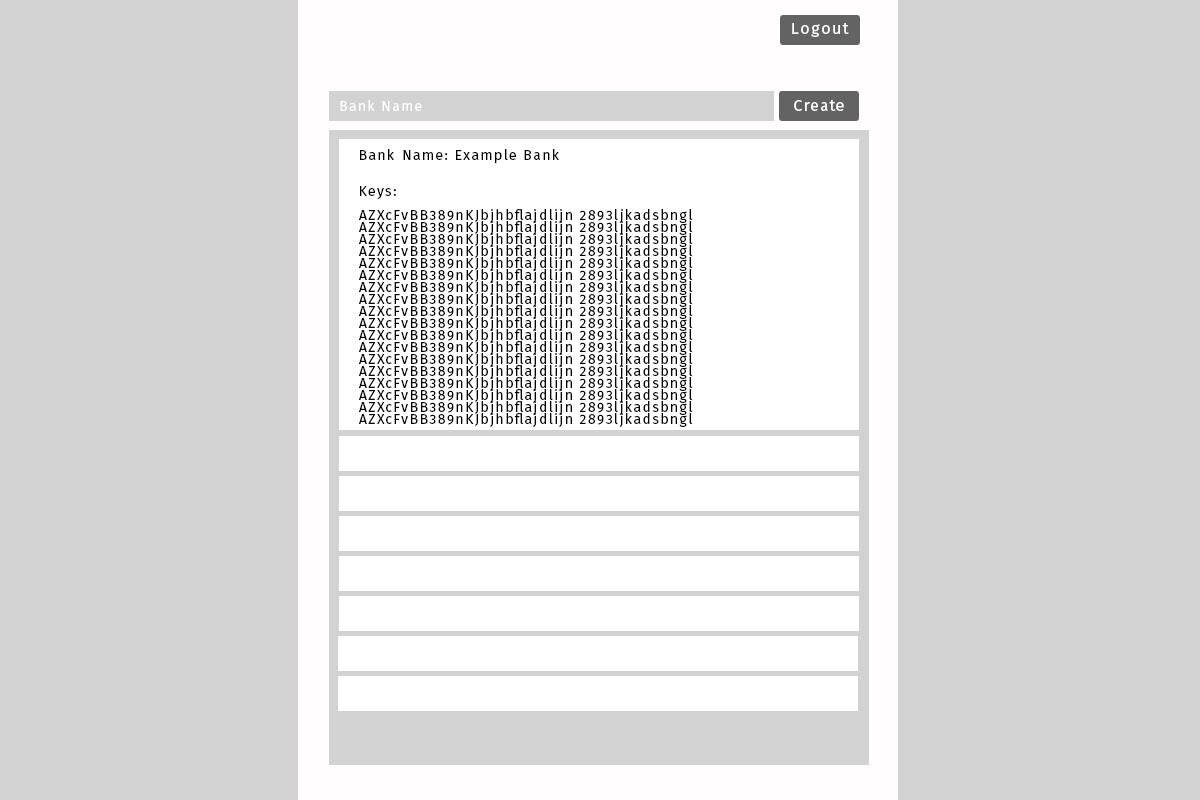
<style>
.page{position:relative;width:1200px;height:800px;background:#d2d2d2}
.page>*{position:absolute;margin:0}
.t1{font:16px "FiraSans-Regular";letter-spacing:0.1em;color:#fffefe}
.t2{font:14px "FiraSans-Regular";letter-spacing:0.1em;color:#ffffff}
.t3{font:16px "FiraSans-Regular";letter-spacing:0.05em;color:#ffffff}
.t4{font:14px/12px "FiraSans-Regular";letter-spacing:0.1em;color:#030000}
</style>
<div class="page">
<p class="t1" style="left:792px;top:23px;width:57px;height:14px">Logout</p>
<p class="t2" style="left:340px;top:100px;width:82px;height:11px">Bank Name</p>
<p class="t3" style="left:794px;top:100px;width:50px;height:11px">Create</p>
<p class="t4" style="left:359px;top:149px;width:334px;height:278px">Bank Name: Example Bank<br><br><br>Keys:<br><br>AZXcFvBB389nKJbjhbflajdlijn 2893ljkadsbngl<br>AZXcFvBB389nKJbjhbflajdlijn 2893ljkadsbngl<br>AZXcFvBB389nKJbjhbflajdlijn 2893ljkadsbngl<br>AZXcFvBB389nKJbjhbflajdlijn 2893ljkadsbngl<br>AZXcFvBB389nKJbjhbflajdlijn 2893ljkadsbngl<br>AZXcFvBB389nKJbjhbflajdlijn 2893ljkadsbngl<br>AZXcFvBB389nKJbjhbflajdlijn 2893ljkadsbngl<br>AZXcFvBB389nKJbjhbflajdlijn 2893ljkadsbngl<br>AZXcFvBB389nKJbjhbflajdlijn 2893ljkadsbngl<br>AZXcFvBB389nKJbjhbflajdlijn 2893ljkadsbngl<br>AZXcFvBB389nKJbjhbflajdlijn 2893ljkadsbngl<br>AZXcFvBB389nKJbjhbflajdlijn 2893ljkadsbngl<br>AZXcFvBB389nKJbjhbflajdlijn 2893ljkadsbngl<br>AZXcFvBB389nKJbjhbflajdlijn 2893ljkadsbngl<br>AZXcFvBB389nKJbjhbflajdlijn 2893ljkadsbngl<br>AZXcFvBB389nKJbjhbflajdlijn 2893ljkadsbngl<br>AZXcFvBB389nKJbjhbflajdlijn 2893ljkadsbngl<br>AZXcFvBB389nKJbjhbflajdlijn 2893ljkadsbngl</p>
</div>
